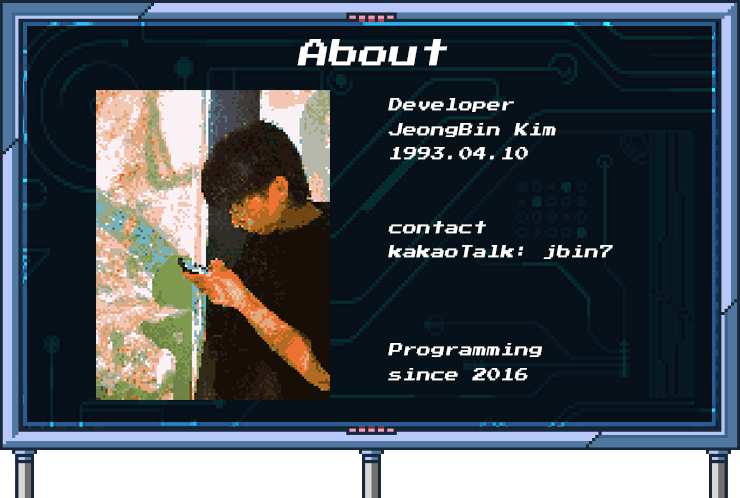
<style>
.page{position:relative;width:740px;height:498px;background:#07111a}
.page>*{position:absolute;margin:0}
.t1{font:30px "PressStart2P";color:#ffffff;font-style:italic}
.t2{font:14px "PressStart2P";color:#ffffff;font-style:italic}
</style>
<div class="page">
<p class="t1" style="left:297px;top:39px;width:151px;height:27px">About</p>
<p class="t2" style="left:388px;top:98px;width:225px;height:283px">Developer<br>JeongBin Kim<br>1993.04.10<br><br><br>contact<br>kakaoTalk: jbin7<br><br><br><br>Programming <br>since 2016</p>
</div>
